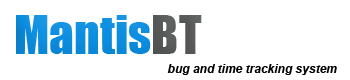
<style>
.page{position:relative;width:350px;height:80px;background:#ffffff}
.page>*{position:absolute;margin:0}
.t1{font:49.4px "Impact";color:#0b8ee1}
.t2{font:49.4px "Impact";color:#565757}
.t3{font:12px "Arial-BoldItalicMT";color:#000000}
</style>
<div class="page">
<p class="t1" style="left:16px;top:15px;width:186px;height:39px">Mantis<span class="t2">BT</span></p>
<p class="t3" style="left:167px;top:64px;width:170px;height:11px">bug and time tracking system</p>
</div>
